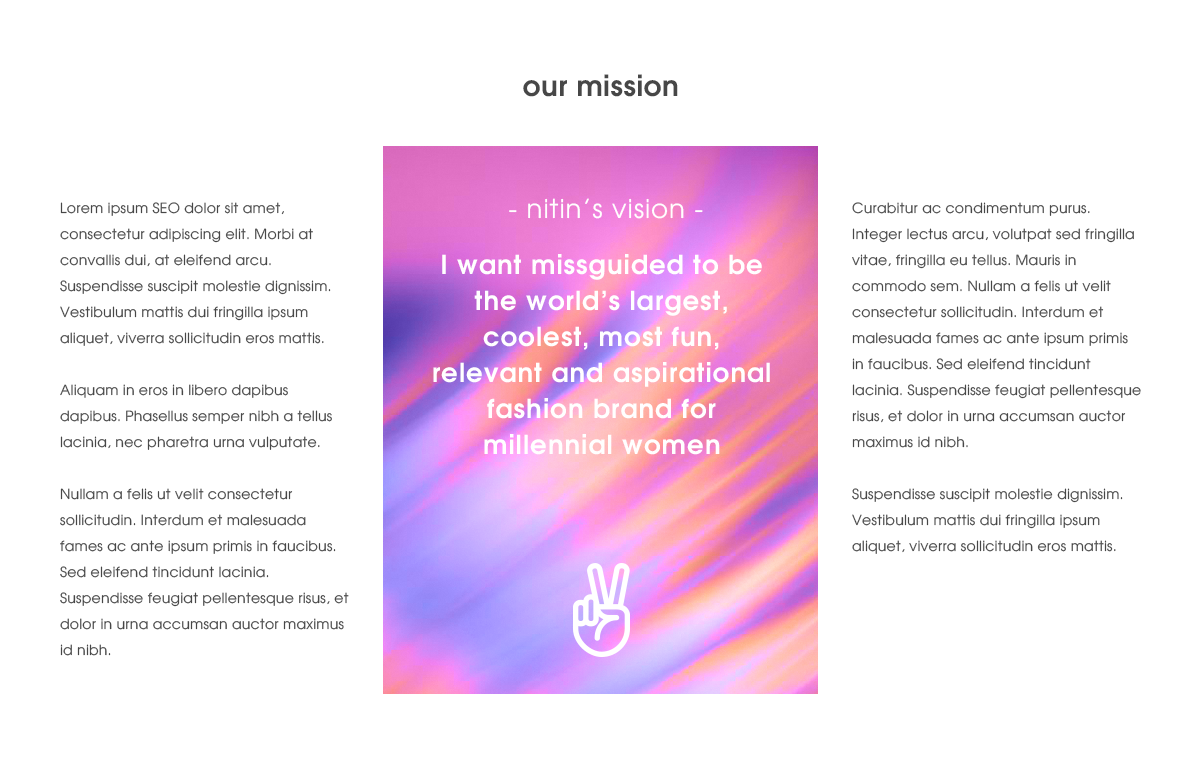
<style>
.page{position:relative;width:1200px;height:769px;background:#ffffff}
.page>*{position:absolute;margin:0}
.t1{font:28px "MIssguided";letter-spacing:0.02em;color:#474747}
.t2{font:26px/36px "MIssguided";letter-spacing:0.04em;color:#ffffff}
.t3{font:26px/32px "MIssguided_Light";letter-spacing:0.04em;color:#ffffff}
.t4{font:26px/56px "MIssguided";letter-spacing:0.04em;color:#ffffff}
.t5{font:14px/26px "MIssguided_Light";letter-spacing:0.02em;color:#474747}
</style>
<div class="page">
<p class="t1" style="left:523px;top:74px;width:155px;height:23px">our mission</p>
<p class="t2" style="left:433px;top:198px;width:337px;height:257px;text-align:center"><span class="t3"> - nitin’s vision -<br></span><span class="t4">I want missguided </span>to be the world’s largest,  coolest, most fun, relevant and aspirational fashion brand for millennial women</p>
<p class="t5" style="left:60px;top:202px;width:289px;height:454px">Lorem ipsum SEO dolor sit amet, consectetur adipiscing elit. Morbi at convallis dui, at eleifend arcu. Suspendisse suscipit molestie dignissim. Vestibulum mattis dui fringilla ipsum aliquet, viverra sollicitudin eros mattis. <br><br>Aliquam in eros in libero dapibus dapibus. Phasellus semper nibh a tellus lacinia, nec pharetra urna vulputate.<br><br>Nullam a felis ut velit consectetur sollicitudin. Interdum et malesuada fames ac ante ipsum primis in faucibus. Sed eleifend tincidunt lacinia. Suspendisse feugiat pellentesque risus, et dolor in urna accumsan auctor maximus id nibh.</p>
<p class="t5" style="left:852px;top:202px;width:289px;height:352px">Curabitur ac condimentum purus. Integer lectus arcu, volutpat sed fringilla vitae, fringilla eu tellus. Mauris in commodo sem. Nullam a felis ut velit consectetur sollicitudin. Interdum et malesuada fames ac ante ipsum primis in faucibus. Sed eleifend tincidunt lacinia. Suspendisse feugiat pellentesque risus, et dolor in urna accumsan auctor maximus id nibh.<br><br>Suspendisse suscipit molestie dignissim. Vestibulum mattis dui fringilla ipsum aliquet, viverra sollicitudin eros mattis.</p>
</div>
